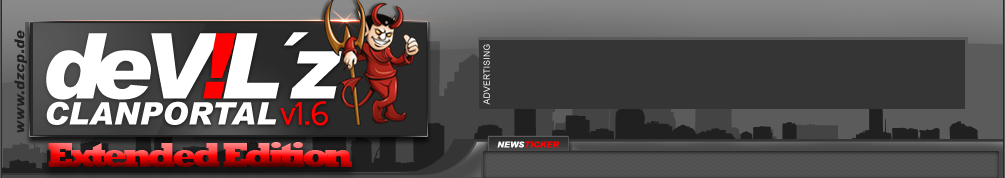
<style>
.page{position:relative;width:1005px;height:178px}
.page>*{position:absolute;margin:0}
.t1{font:13.5px "Arial-BlackItalic";letter-spacing:0.04em;color:#202020}
.t2{font:90.9px "Arial-BlackItalic";letter-spacing:-0.12em;color:#ffffff}
.t3{font:90.9px "Arial-BlackItalic";letter-spacing:-0.12em;color:#ff0000}
.t4{font:8.4px "ArialMT";letter-spacing:0.04em;color:#ffffff;text-transform:uppercase}
.t5{font:31.2px "Arial-BlackItalic";color:#ffffff;text-transform:uppercase}
.t6{font:36px "Raavi";letter-spacing:-0.12em;color:#ff0000}
.t7{font:36px "Rockwell-ExtraBold";letter-spacing:-0.12em}
.t8{font:8.2px "Arial-BlackItalic";color:#ff0000;text-transform:uppercase}
.t9{font:8.2px "Arial-BlackItalic";color:#ffffff;text-transform:uppercase}
</style>
<div class="page">
<p class="t1" style="left:14px;top:30px;width:13px;height:103px;rotate:-90deg">www.dzcp.de</p>
<p class="t2" style="left:46px;top:32px;width:296px;height:68px">deV<span class="t3">!</span>L´z</p>
<p class="t4" style="left:483px;top:44px;width:7px;height:61px;rotate:-90deg">advertising</p>
<p class="t5" style="left:46px;top:101px;width:231px;height:24px">ClanPortal</p>
<p class="t6" style="left:280px;top:101px;width:48px;height:25px">v1.6</p>
<p class="t7" style="left:48px;top:142px;width:304px;height:25px">Extended Edition</p>
<p class="t8" style="left:497px;top:141px;width:63px;height:7px"><span class="t9">news</span>ticker</p>
</div>
